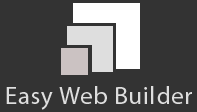
<style>
.page{position:relative;width:197px;height:112px;background:#333333}
.page>*{position:absolute;margin:0}
.t1{font:25px "MyriadPro-Regular";letter-spacing:0.03em;color:#dedede}
</style>
<div class="page">
<p class="t1" style="left:6px;top:86px;width:186px;height:24px">Easy Web Builder</p>
</div>
